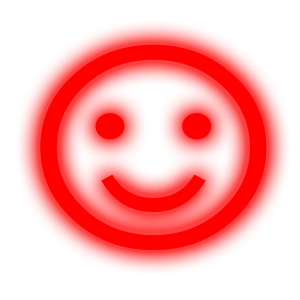
<style>
.page{position:relative;width:300px;height:300px;background:#ffffff}
.page>*{position:absolute;margin:0}
.t1{font:330px "ArialMT";color:#ff0000;scale:1.1 1}
</style>
<div class="page">
<p class="t1" style="left:40px;top:44px;width:227px;height:207px">☺</p>
</div>
